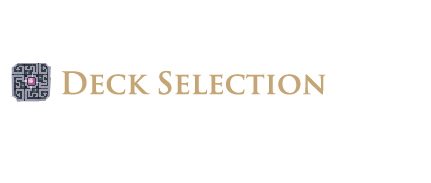
<style>
.page{position:relative;width:431px;height:183px;background:#ffffff}
.page>*{position:absolute;margin:0}
.t1{font:30px "TrajanPro-Bold";color:#c6a573}
</style>
<div class="page">
<p class="t1" style="left:61px;top:70px;width:265px;height:25px">Deck Selection</p>
</div>
